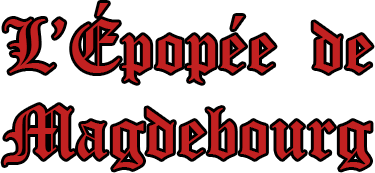
<style>
.page{position:relative;width:375px;height:173px;background:#ffffff}
.page>*{position:absolute;margin:0}
.t1{font:72px "OldEnglishTextMT";color:#c22121}
</style>
<div class="page">
<p class="t1" style="left:3px;top:3px;width:369px;height:167px">L’Épopée  de<br>Magdebourg</p>
</div>
